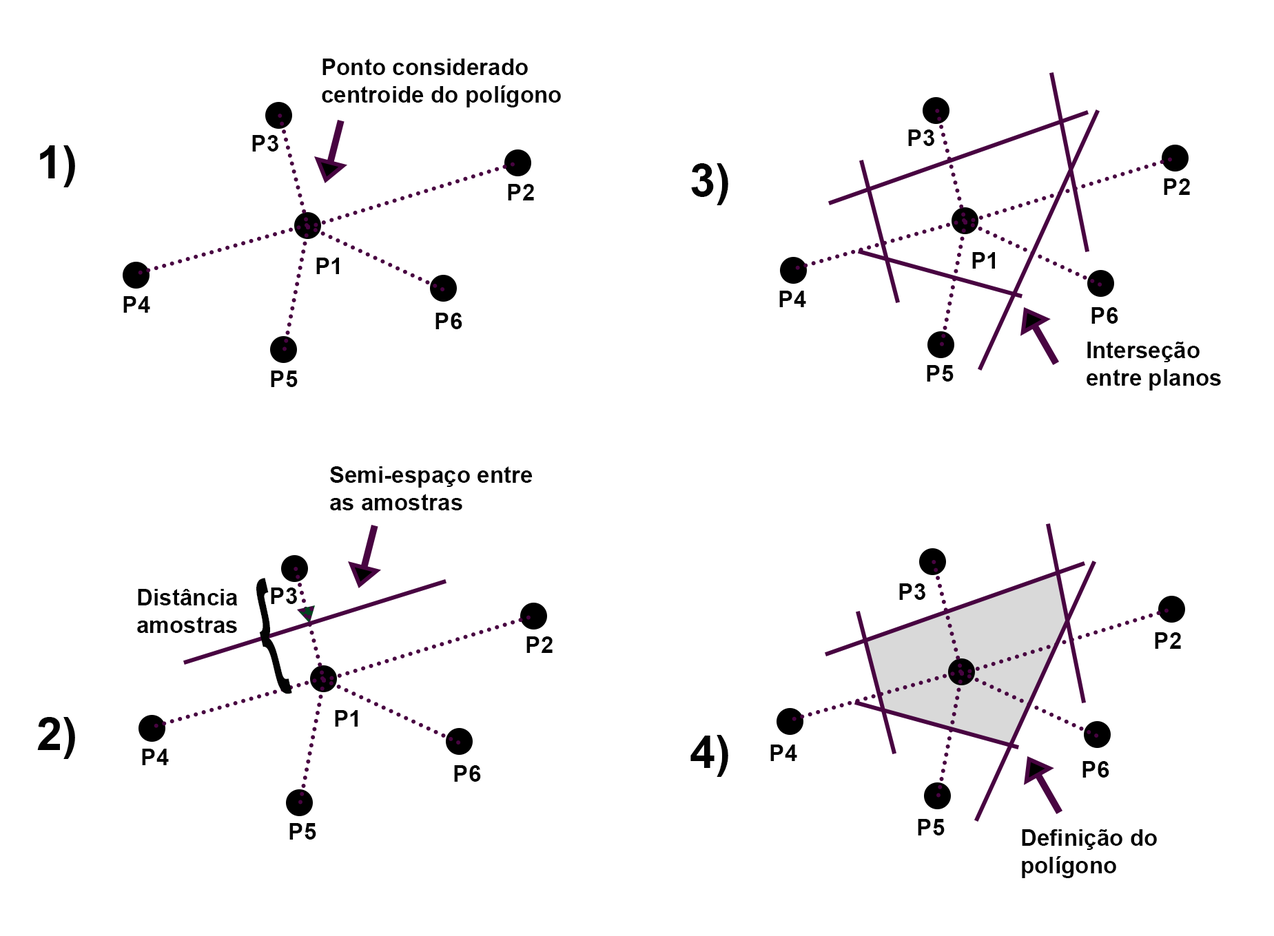
<style>
.page{position:relative;width:1274px;height:936px;background:#ffffff}
.page>*{position:absolute;margin:0}
.t1{font:23px "Arial-BoldMT";color:#030303}
.t2{font:45.9px "Arial-BoldMT";color:#030303}
.t3{font:125.9px "Arial-BoldMT";color:#030303;scale:0.42 1}
</style>
<div class="page">
<p class="t1" style="left:322px;top:59px;width:239px;height:48px">Ponto considerado <br>centroide do polígono</p>
<p class="t1" style="left:252px;top:135px;width:26px;height:17px">P3</p>
<p class="t1" style="left:908px;top:130px;width:26px;height:16px">P3</p>
<p class="t2" style="left:691px;top:163px;width:37px;height:42px">3)</p>
<p class="t1" style="left:508px;top:184px;width:26px;height:16px">P2</p>
<p class="t1" style="left:1164px;top:178px;width:26px;height:17px">P2</p>
<p class="t1" style="left:316px;top:258px;width:23px;height:16px">P1</p>
<p class="t1" style="left:972px;top:252px;width:23px;height:17px">P1</p>
<p class="t1" style="left:779px;top:291px;width:27px;height:16px">P4</p>
<p class="t1" style="left:123px;top:296px;width:27px;height:17px">P4</p>
<p class="t1" style="left:435px;top:313px;width:27px;height:16px">P6</p>
<p class="t1" style="left:1091px;top:307px;width:27px;height:17px">P6</p>
<p class="t1" style="left:1086px;top:342px;width:135px;height:49px">Interseção <br>entre planos</p>
<p class="t1" style="left:927px;top:365px;width:26px;height:17px">P5</p>
<p class="t1" style="left:271px;top:371px;width:27px;height:16px">P5</p>
<p class="t1" style="left:330px;top:466px;width:202px;height:44px">Semi-espaço entre <br>as amostras</p>
<p class="t3" style="left:256px;top:578px;width:36px;height:116px;rotate:-13deg">{</p>
<p class="t1" style="left:137px;top:589px;width:101px;height:44px">Distância <br>amostras</p>
<p class="t1" style="left:271px;top:588px;width:26px;height:16px">P3</p>
<p class="t1" style="left:899px;top:583px;width:26px;height:17px">P3</p>
<p class="t1" style="left:526px;top:637px;width:26px;height:16px">P2</p>
<p class="t1" style="left:1155px;top:632px;width:26px;height:17px">P2</p>
<p class="t1" style="left:335px;top:710px;width:23px;height:17px">P1</p>
<p class="t2" style="left:690px;top:735px;width:38px;height:42px">4)</p>
<p class="t1" style="left:142px;top:749px;width:27px;height:16px">P4</p>
<p class="t1" style="left:770px;top:745px;width:27px;height:16px">P4</p>
<p class="t1" style="left:1082px;top:761px;width:27px;height:17px">P6</p>
<p class="t1" style="left:454px;top:765px;width:27px;height:17px">P6</p>
<p class="t1" style="left:918px;top:819px;width:26px;height:17px">P5</p>
<p class="t1" style="left:289px;top:823px;width:27px;height:17px">P5</p>
<p class="t1" style="left:1022px;top:829px;width:135px;height:49px">Definição do <br>polígono</p>
</div>
